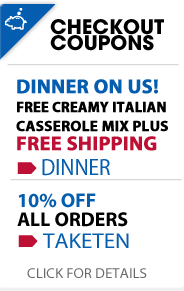
<style>
.page{position:relative;width:184px;height:291px;background:#ffffff}
.page>*{position:absolute;margin:0}
.t1{font:20px "AvantGarde-Bold";color:#000000;text-transform:uppercase}
.t2{font:15px/19px "MyriadPro-Bold";color:#000000;text-transform:uppercase;font-weight:bold;scale:0.95 1}
.t3{font:20px/19px "MyriadPro-Bold";color:#055daf;text-transform:uppercase;font-weight:bold}
.t4{font:15px/19px "MyriadPro-Bold";color:#000000;text-transform:uppercase;font-weight:bold}
.t5{font:20px/19px "MyriadPro-Bold";color:#be0f34;text-transform:uppercase;font-weight:bold}
.t6{font:23.6px "MyriadPro-Regular";color:#055daf;text-transform:uppercase;scale:0.91 1}
.t7{font:20px/19px "MyriadPro-Bold";color:#000000;text-transform:uppercase}
.t8{font:20px/19px "MyriadPro-Bold";color:#055daf;text-transform:uppercase}
.t9{font:21.6px "MyriadPro-Regular";color:#055daf;text-transform:uppercase;scale:1.06 1}
.t10{font:14px "MyriadPro-Regular";color:#696969;text-transform:uppercase;scale:1.06 1}
</style>
<div class="page">
<p class="t1" style="left:50px;top:19px;width:114px;height:16px">Checkout</p>
<p class="t1" style="left:50px;top:35px;width:104px;height:16px">cOUPONS</p>
<p class="t2" style="left:16px;top:79px;width:152px;height:72px"><span class="t3">dinner on us!<br></span>free creamy italian<br><span class="t4">casserole mix plus<br></span><span class="t5">free shipping</span></p>
<p class="t6" style="left:42px;top:159px;width:68px;height:17px">dinner</p>
<p class="t7" style="left:17px;top:193px;width:111px;height:34px"><span class="t8">10% OFF <br></span>ALL ORDERS</p>
<p class="t9" style="left:43px;top:233px;width:86px;height:15px">TAKETEN</p>
<p class="t10" style="left:27px;top:268px;width:120px;height:10px">click for details</p>
</div>
